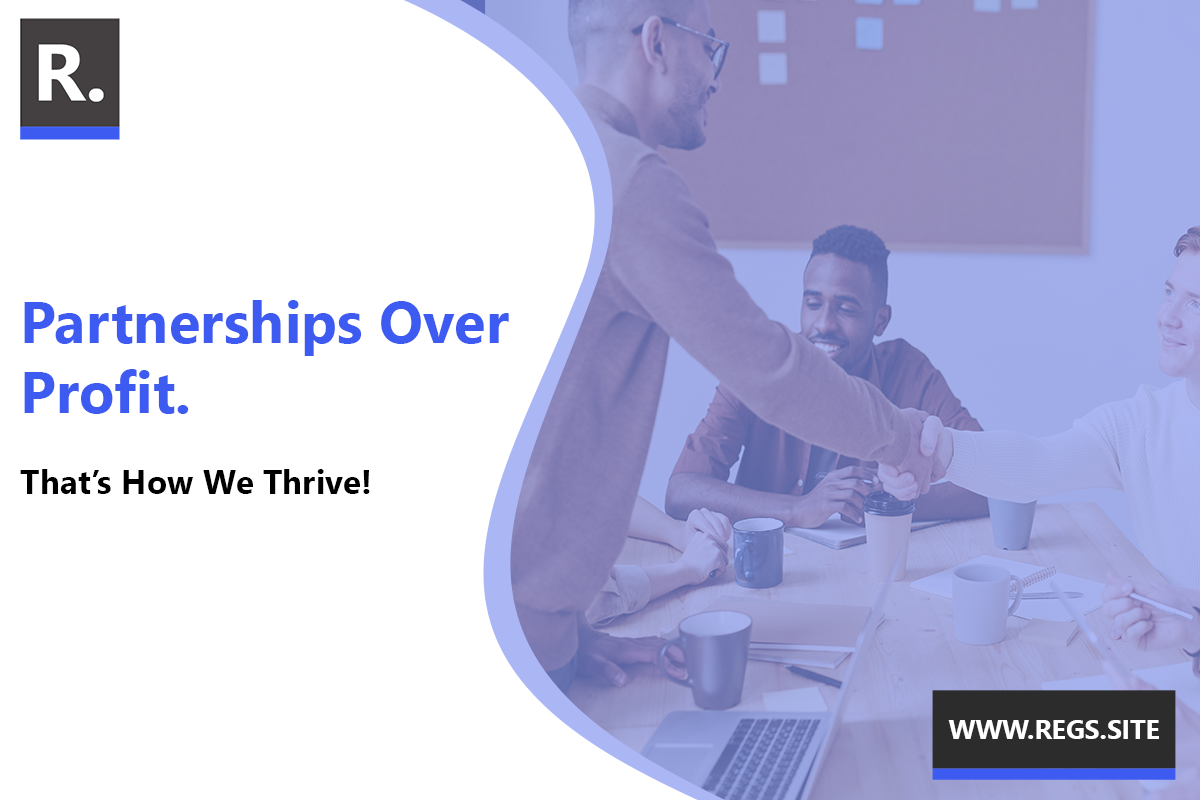
<style>
.page{position:relative;width:1200px;height:800px;background:#ffffff}
.page>*{position:absolute;margin:0}
.t1{font:58.3px "SegoeUI-Bold";color:#3d5af1}
.t2{font:33.3px "SegoeUI-Bold";color:#000000}
.t3{font:26.6px "SegoeUI-Bold";color:#ffffff}
</style>
<div class="page">
<p class="t1" style="left:24px;top:300px;width:485px;height:114px;text-align:right">Partnerships Over Profit.</p>
<p class="t2" style="left:20px;top:469px;width:350px;height:25px">That’s How We Thrive!</p>
<p class="t3" style="left:948px;top:720px;width:211px;height:19px">WWW.REGS.SITE</p>
</div>
